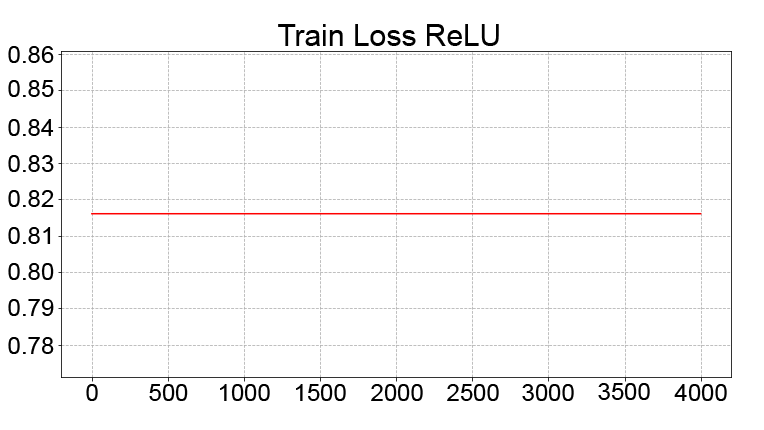
<style>
.page{position:relative;width:764px;height:430px;background:#ffffff}
.page>*{position:absolute;margin:0}
.t1{font:30px "ArialMT";color:#000000}
.t2{font:24px "ArialMT";color:#000000}
</style>
<div class="page">
<p class="t1" style="left:278px;top:24px;width:221px;height:22px">Train Loss ReLU</p>
<p class="t2" style="left:8px;top:46px;width:46px;height:17px">0.86</p>
<p class="t2" style="left:8px;top:80px;width:46px;height:17px">0.85</p>
<p class="t2" style="left:8px;top:119px;width:46px;height:17px">0.84</p>
<p class="t2" style="left:8px;top:155px;width:46px;height:17px">0.83</p>
<p class="t2" style="left:8px;top:190px;width:46px;height:17px">0.82</p>
<p class="t2" style="left:8px;top:227px;width:43px;height:17px">0.81</p>
<p class="t2" style="left:8px;top:263px;width:46px;height:17px">0.80</p>
<p class="t2" style="left:8px;top:299px;width:46px;height:17px">0.79</p>
<p class="t2" style="left:8px;top:337px;width:46px;height:17px">0.78</p>
<p class="t2" style="left:86px;top:384px;width:12px;height:17px">0</p>
<p class="t2" style="left:149px;top:384px;width:39px;height:17px">500</p>
<p class="t2" style="left:220px;top:384px;width:50px;height:17px">1000</p>
<p class="t2" style="left:296px;top:384px;width:50px;height:17px">1500</p>
<p class="t2" style="left:371px;top:384px;width:52px;height:17px">2000</p>
<p class="t2" style="left:447px;top:384px;width:52px;height:17px">2500</p>
<p class="t2" style="left:522px;top:384px;width:52px;height:17px">3000</p>
<p class="t2" style="left:598px;top:383px;width:52px;height:17px">3500</p>
<p class="t2" style="left:674px;top:384px;width:53px;height:17px">4000</p>
</div>
